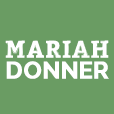
<style>
.page{position:relative;width:114px;height:114px;background:#6a9c63}
.page>*{position:absolute;margin:0}
.t1{font:24.1px "Bitter-Bold";color:#ffffff;text-transform:uppercase;font-weight:bold;scale:0.93 1}
.t2{font:24.1px/20.9px "Raleway-Bold";color:#ffffff;text-transform:uppercase;font-weight:bold}
</style>
<div class="page">
<p class="t1" style="left:5px;top:40px;width:104px;height:39px">Mariah <br><span class="t2">Donner</span></p>
</div>
